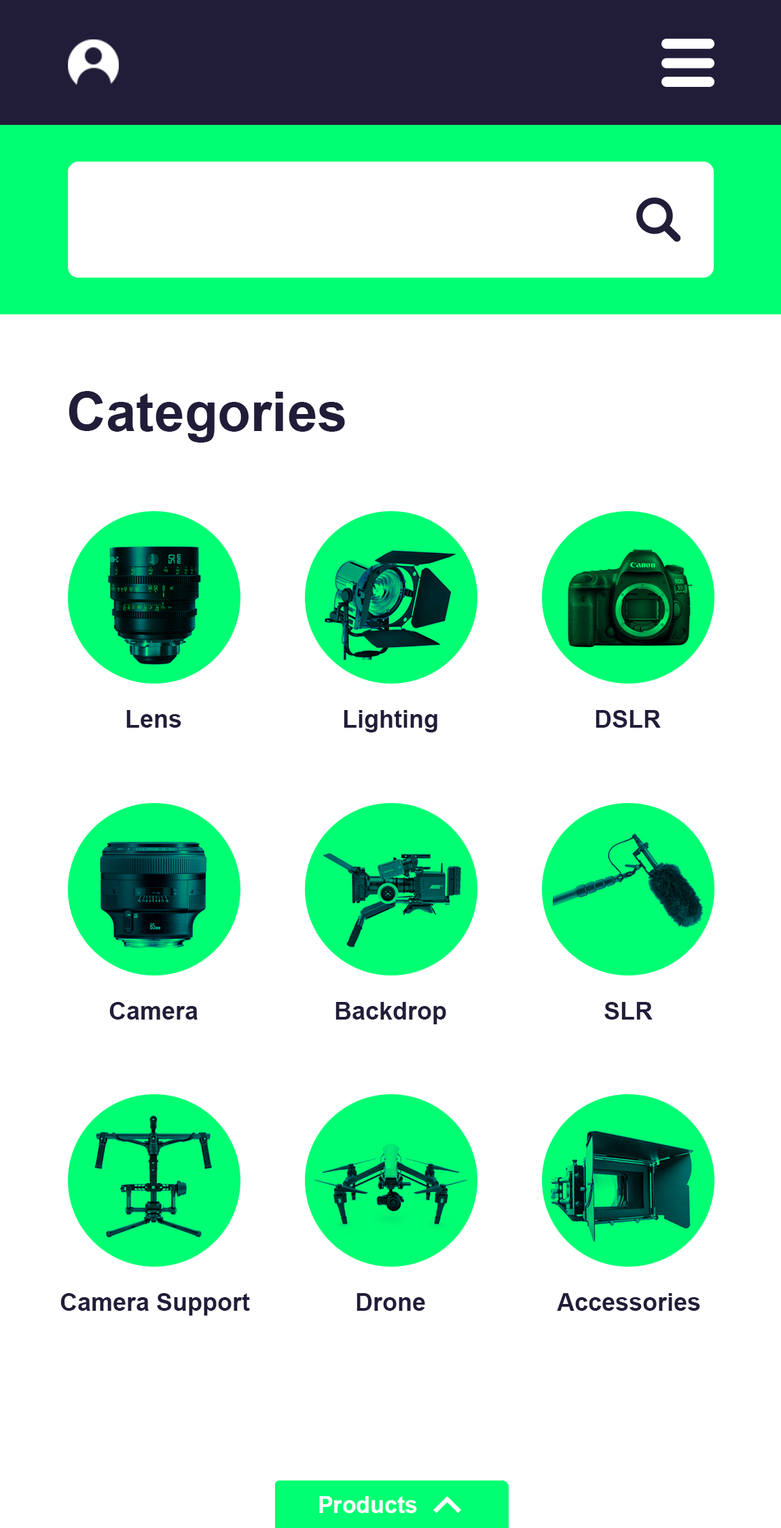
<style>
.page{position:relative;width:781px;height:1528px;background:#ffffff}
.page>*{position:absolute;margin:0}
.t1{font:54.3px "Arial-BoldMT";color:#211d39}
.t2{font:24.4px "Arial-BoldMT";color:#211d39}
.t3{font:24.4px "Arial-BoldMT";color:#211d39;text-transform:uppercase}
.t4{font:23.1px "Arial-BoldMT";color:#ffffff}
</style>
<div class="page">
<p class="t1" style="left:69px;top:391px;width:276px;height:52px">Categories</p>
<p class="t2" style="left:126px;top:710px;width:55px;height:18px"><span class="t3">l</span>ens</p>
<p class="t2" style="left:343px;top:710px;width:94px;height:22px"><span class="t3">L</span>ighting</p>
<p class="t2" style="left:595px;top:710px;width:65px;height:18px">DSLR</p>
<p class="t2" style="left:109px;top:1002px;width:89px;height:17px"><span class="t3">c</span>amera</p>
<p class="t2" style="left:335px;top:1002px;width:111px;height:22px">Backdrop</p>
<p class="t2" style="left:604px;top:1002px;width:48px;height:17px">SLR</p>
<p class="t2" style="left:60px;top:1293px;width:190px;height:22px"><span class="t3">c</span>amera Support</p>
<p class="t2" style="left:356px;top:1293px;width:69px;height:18px"><span class="t3">D</span>rone</p>
<p class="t2" style="left:557px;top:1293px;width:143px;height:18px">Accessories</p>
<p class="t4" style="left:319px;top:1496px;width:98px;height:17px">Products</p>
</div>
